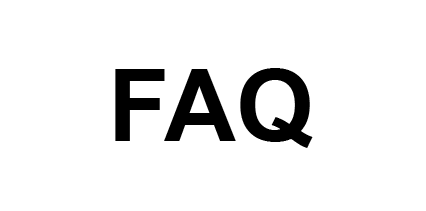
<style>
.page{position:relative;width:426px;height:211px;background:#ffffff}
.page>*{position:absolute;margin:0}
.t1{font:100px "Arial-BoldMT";color:#000000}
</style>
<div class="page">
<p class="t1" style="left:115px;top:68px;width:198px;height:80px">FAQ</p>
</div>
